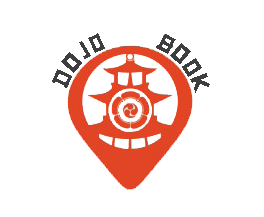
<style>
.page{position:relative;width:264px;height:217px;background:#ffffff}
.page>*{position:absolute;margin:0}
.t1{font:39.6px "CFSamuraiBob-Regular";color:#3e3e3e}
.t2{font:40px "CFSamuraiBob-Regular";color:#3e3e3e}
</style>
<div class="page">
<p class="t1" style="left:79px;top:41px;width:12px;height:18px;rotate:-31deg">J</p>
<p class="t2" style="left:88px;top:33px;width:17px;height:20px;rotate:-25deg">O</p>
<p class="t2" style="left:61px;top:52px;width:21px;height:21px;rotate:-49deg">O</p>
<p class="t2" style="left:170px;top:43px;width:21px;height:21px;rotate:40deg">O</p>
<p class="t2" style="left:182px;top:58px;width:20px;height:19px;rotate:57deg">O</p>
<p class="t2" style="left:52px;top:69px;width:20px;height:19px;rotate:-65deg">D</p>
<p class="t2" style="left:190px;top:73px;width:20px;height:20px;rotate:69deg">K</p>
</div>
